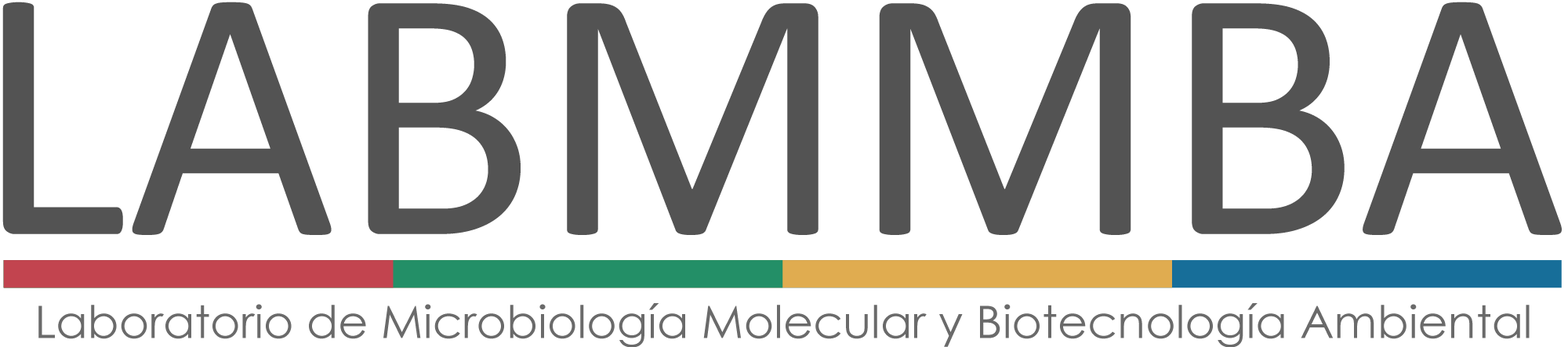
<style>
.page{position:relative;width:1568px;height:347px;background:#ffffff}
.page>*{position:absolute;margin:0}
.t1{font:365.1px "Calibri";color:#535353}
.t2{font:44.8px "CenturyGothic";color:#6a6a6a}
</style>
<div class="page">
<p class="t1" style="left:2px;top:2px;width:1560px;height:233px">LABMMBA</p>
<p class="t2" style="left:38px;top:303px;width:1492px;height:45px">Laboratorio de Microbiología Molecular y Biotecnología Ambiental</p>
</div>
